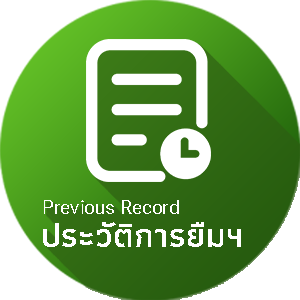
<style>
.page{position:relative;width:300px;height:300px;background:#ffffff}
.page>*{position:absolute;margin:0}
.t1{font:18.6px "Roboto-Regular";letter-spacing:0.01em;color:#ffffff}
.t2{font:34.5px "Athiti-SemiBold";letter-spacing:0.01em;color:#ffffff}
</style>
<div class="page">
<p class="t1" style="left:44px;top:200px;width:135px;height:14px">Previous Record</p>
<p class="t2" style="left:43px;top:222px;width:198px;height:25px">ประวัติการยืมฯ</p>
</div>
